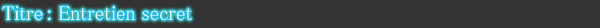
<style>
.page{position:relative;width:600px;height:28px;background:#333333}
.page>*{position:absolute;margin:0}
.t1{font:20px "MS-PMincho";color:#ffffff}
</style>
<div class="page">
<p class="t1" style="left:2px;top:6px;width:190px;height:15px">Titre : Entretien secret</p>
</div>
